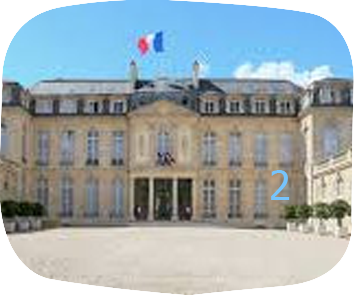
<style>
.page{position:relative;width:354px;height:295px}
.page>*{position:absolute;margin:0}
.t1{font:40px "Tahoma";color:#76c4fc}
</style>
<div class="page">
<p class="t1" style="left:271px;top:170px;width:19px;height:30px">2</p>
</div>
